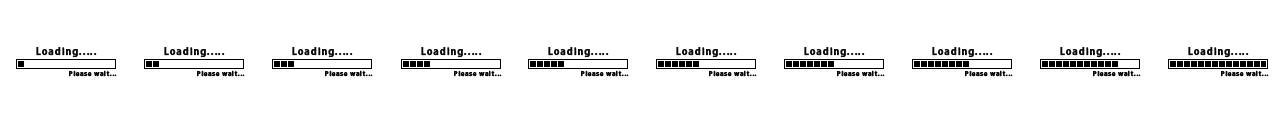
<style>
.page{position:relative;width:1280px;height:128px;background:#ffffff}
.page>*{position:absolute;margin:0}
.t1{font:9.5px "KozGoPr6N-Bold";letter-spacing:0.085em;color:#090909;font-weight:bold}
.t2{font:6.3px "KozGoPr6N-Bold";letter-spacing:0.085em;color:#090909;font-weight:bold}
</style>
<div class="page">
<p class="t1" style="left:36px;top:47px;width:61px;height:11px">Loading.....</p>
<p class="t1" style="left:164px;top:47px;width:61px;height:11px">Loading.....</p>
<p class="t1" style="left:292px;top:47px;width:61px;height:11px">Loading.....</p>
<p class="t1" style="left:421px;top:47px;width:61px;height:11px">Loading.....</p>
<p class="t1" style="left:548px;top:47px;width:61px;height:11px">Loading.....</p>
<p class="t1" style="left:676px;top:47px;width:61px;height:11px">Loading.....</p>
<p class="t1" style="left:804px;top:47px;width:61px;height:11px">Loading.....</p>
<p class="t1" style="left:932px;top:47px;width:61px;height:11px">Loading.....</p>
<p class="t1" style="left:1060px;top:47px;width:61px;height:11px">Loading.....</p>
<p class="t1" style="left:1188px;top:47px;width:61px;height:11px">Loading.....</p>
<p class="t2" style="left:69px;top:70px;width:48px;height:7px">Please wait...</p>
<p class="t2" style="left:197px;top:70px;width:48px;height:7px">Please wait...</p>
<p class="t2" style="left:325px;top:70px;width:48px;height:7px">Please wait...</p>
<p class="t2" style="left:454px;top:70px;width:48px;height:7px">Please wait...</p>
<p class="t2" style="left:581px;top:70px;width:48px;height:7px">Please wait...</p>
<p class="t2" style="left:709px;top:70px;width:48px;height:7px">Please wait...</p>
<p class="t2" style="left:837px;top:70px;width:48px;height:7px">Please wait...</p>
<p class="t2" style="left:965px;top:70px;width:48px;height:7px">Please wait...</p>
<p class="t2" style="left:1093px;top:70px;width:48px;height:7px">Please wait...</p>
<p class="t2" style="left:1221px;top:70px;width:48px;height:7px">Please wait...</p>
</div>
